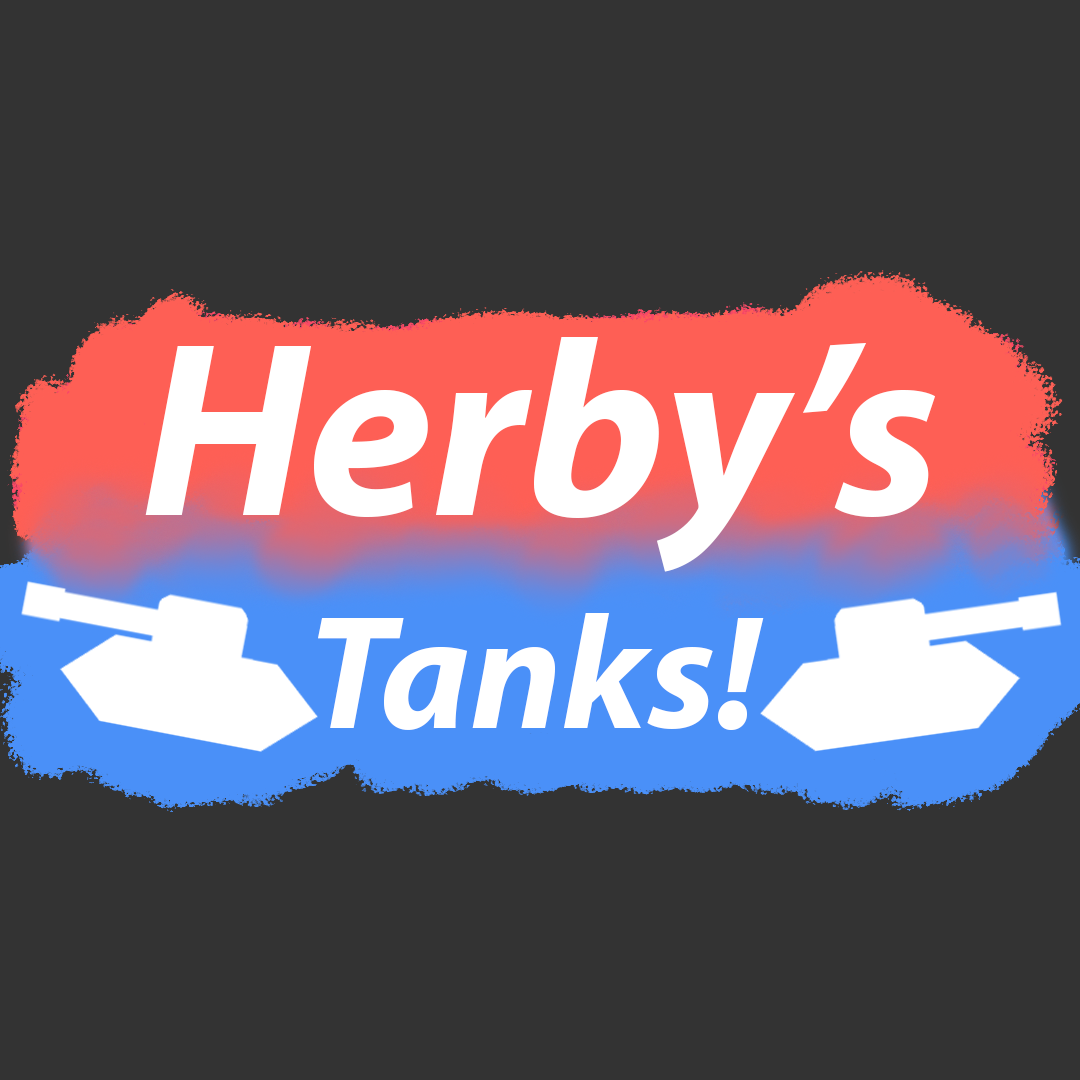
<style>
.page{position:relative;width:1080px;height:1080px;background:#333333}
.page>*{position:absolute;margin:0}
.t1{font:250px "MyriadPro-BoldIt";color:#ffffff}
.t2{font:162.5px "MyriadPro-BoldIt";color:#ffffff}
</style>
<div class="page">
<p class="t1" style="left:145px;top:337px;width:790px;height:235px">Herby’s</p>
<p class="t2" style="left:318px;top:613px;width:446px;height:117px">Tanks!</p>
</div>
